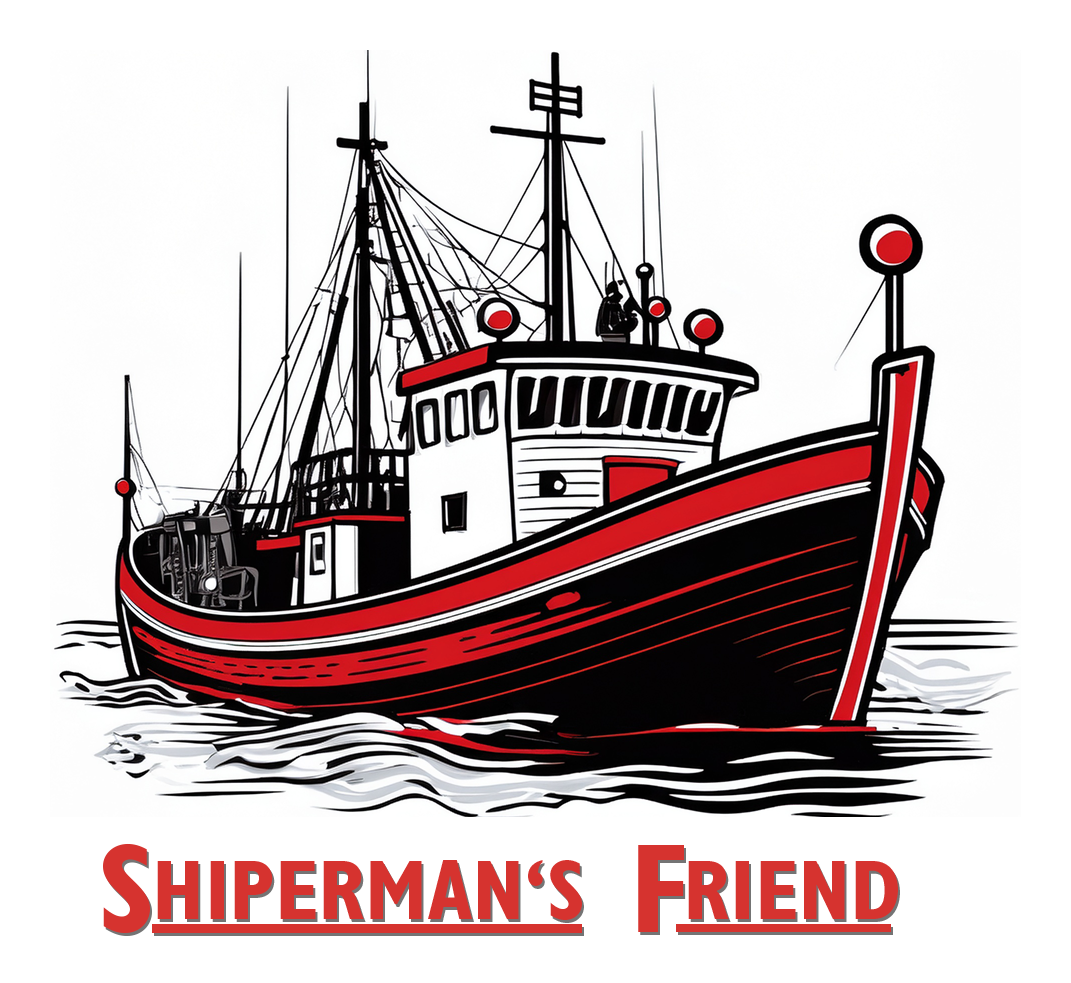
<style>
.page{position:relative;width:1071px;height:983px;background:#ffffff}
.page>*{position:absolute;margin:0}
.t1{font:127.3px "GillSans-CondensedBold";letter-spacing:0.06em;color:#d6332f}
.t2{font:85px "GillSans-CondensedBold";color:#d6332f}
</style>
<div class="page">
<p class="t1" style="left:103px;top:843px;width:581px;height:90px">S              F</p>
<p class="t2" style="left:157px;top:860px;width:425px;height:60px">HIPERMAN‘S</p>
<p class="t2" style="left:688px;top:861px;width:210px;height:58px">RIEND</p>
</div>
